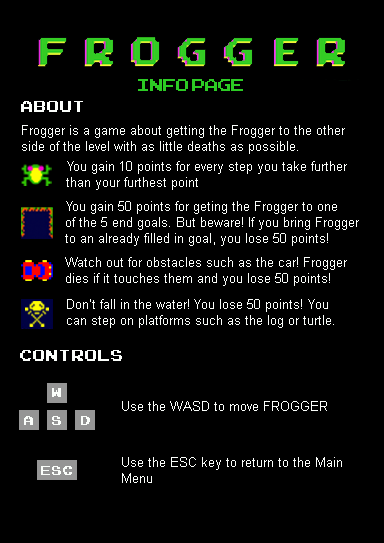
<style>
.page{position:relative;width:384px;height:543px;background:#000000}
.page>*{position:absolute;margin:0}
.t1{font:24px "ArcadeClassic";color:#2ccb24}
.t2{font:16px "JoystixMonospace-Regular";color:#fbfefb}
.t3{font:13.3px "ArialMT";color:#fbfefb}
.t4{font:13.3px "JoystixMonospace-Regular";color:#fbfefb}
</style>
<div class="page">
<p class="t1" style="left:138px;top:79px;width:105px;height:12px">INFO PAGE</p>
<p class="t2" style="left:21px;top:101px;width:62px;height:11px">ABOUT</p>
<p class="t3" style="left:22px;top:125px;width:323px;height:29px">Frogger is a game about getting the Frogger to the other<br>side of the level with as little deaths as possible.</p>
<p class="t3" style="left:66px;top:161px;width:281px;height:29px">You gain 10 points for every step you take further<br>than your furthest point</p>
<p class="t3" style="left:65px;top:201px;width:294px;height:45px">You gain 50 points for geting the Frogger to one<br>of the 5 end goals. But beware! If you bring Frogger<br>to an already filled in goal, you lose 50 points!</p>
<p class="t3" style="left:65px;top:257px;width:282px;height:29px">Watch out for obstacles such as the car! Frogger <br>dies if it touches them and you lose 50 points!</p>
<p class="t3" style="left:67px;top:299px;width:267px;height:29px">Don’t fall in the water! You lose 50 points! You <br>can step on platforms such as the log or turtle.</p>
<p class="t2" style="left:20px;top:350px;width:102px;height:11px">CONTROLS</p>
<p class="t4" style="left:52px;top:388px;width:9px;height:9px">W</p>
<p class="t3" style="left:122px;top:401px;width:205px;height:10px">Use the WASD to move FROGGER</p>
<p class="t4" style="left:24px;top:416px;width:9px;height:9px">A</p>
<p class="t4" style="left:52px;top:416px;width:9px;height:9px">S</p>
<p class="t4" style="left:81px;top:416px;width:9px;height:9px">D</p>
<p class="t3" style="left:122px;top:457px;width:220px;height:26px">Use the ESC key to return to the Main<br>Menu</p>
<p class="t4" style="left:41px;top:466px;width:31px;height:9px">ESC</p>
</div>
